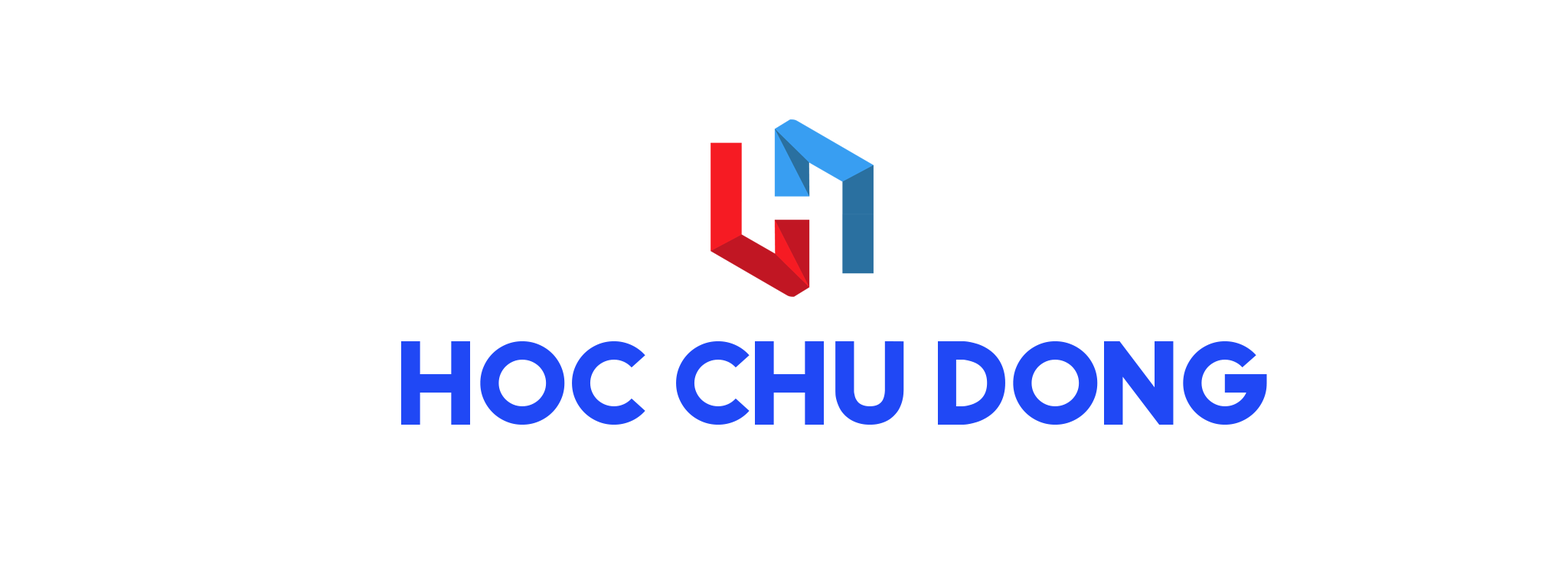
<style>
.page{position:relative;width:1568px;height:580px;background:#ffffff}
.page>*{position:absolute;margin:0}
.t1{font:111px "FalcoBlack";color:#2048f5}
</style>
<div class="page">
<p class="t1" style="left:401px;top:341px;width:866px;height:84px">hoc chu dong</p>
</div>
